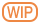
<style>
.page{position:relative;width:40px;height:24px;background:#ffffff}
.page>*{position:absolute;margin:0}
.t1{font:16.4px "HelveticaNeue-Medium";color:#ee8844;scale:0.84 1}
</style>
<div class="page">
<p class="t1" style="left:7px;top:6px;width:26px;height:12px">WIP</p>
</div>
